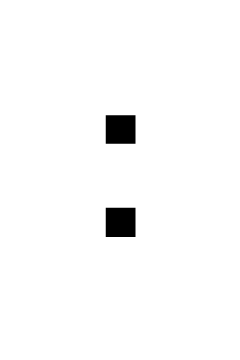
<style>
.page{position:relative;width:240px;height:360px;background:#ffffff}
.page>*{position:absolute;margin:0}
.t1{font:195.4px "MoeumTXB-HM";color:#000000;scale:1.13 1}
</style>
<div class="page">
<p class="t1" style="left:105px;top:115px;width:31px;height:122px">:</p>
</div>
